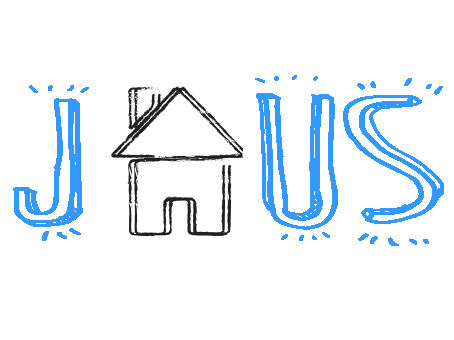
<style>
.page{position:relative;width:454px;height:340px;background:#ffffff}
.page>*{position:absolute;margin:0}
.t1{font:190.5px "CuteCartoon";color:#3399ff;font-weight:bold;scale:2.14 1}
</style>
<div class="page">
<p class="t1" style="left:13px;top:75px;width:431px;height:171px">J us</p>
</div>
